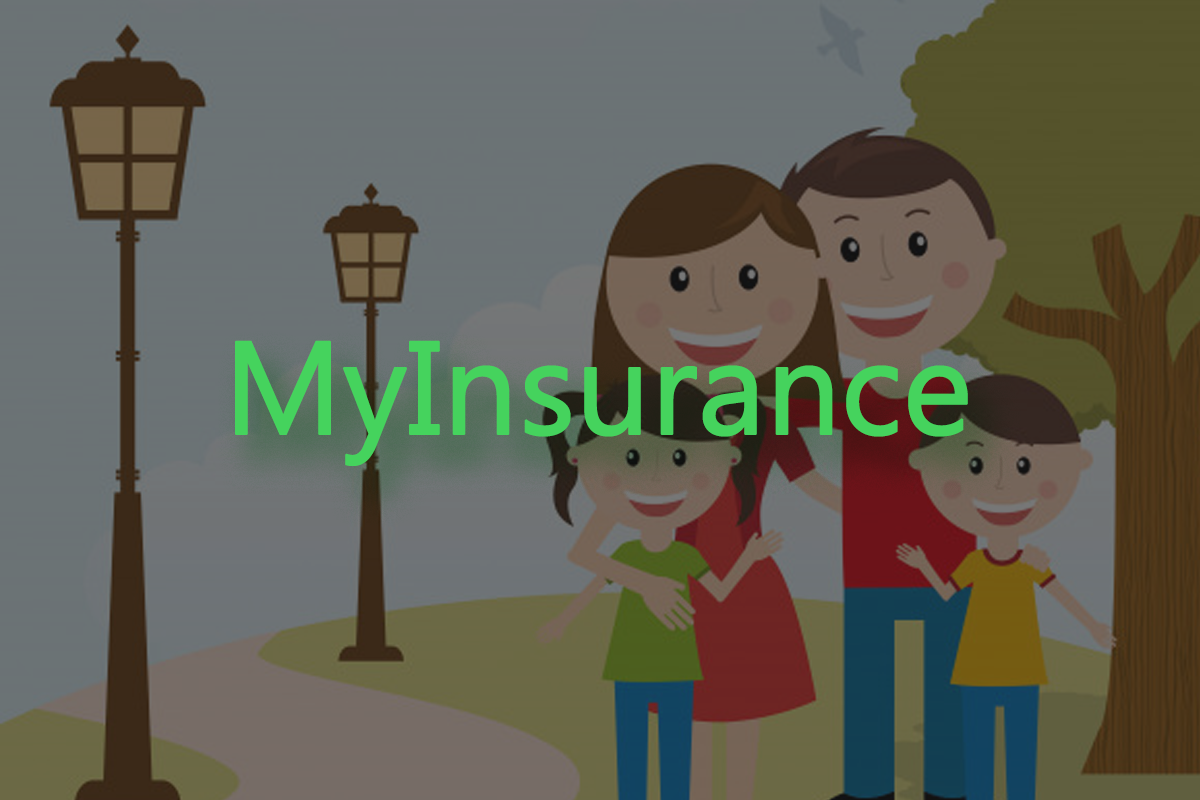
<style>
.page{position:relative;width:1200px;height:800px}
.page>*{position:absolute;margin:0}
.t1{font:131.6px "Gadugi";letter-spacing:-0.02em;color:#45d35d;font-weight:bold}
</style>
<div class="page">
<p class="t1" style="left:235px;top:340px;width:733px;height:126px">MyInsurance</p>
</div>
